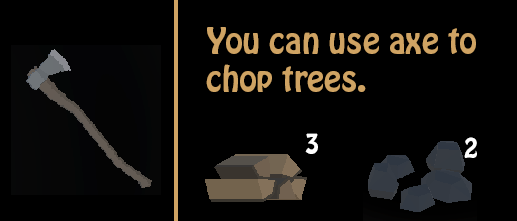
<style>
.page{position:relative;width:517px;height:221px;background:#000000}
.page>*{position:absolute;margin:0}
.t1{font:32px "HoboStd";color:#cfa363}
.t2{font:25px "HoboStd";color:#ffffff}
</style>
<div class="page">
<p class="t1" style="left:206px;top:27px;width:270px;height:65px;text-align:right">You can use axe to<br>.chop trees</p>
<p class="t2" style="left:305px;top:133px;width:13px;height:21px">3</p>
<p class="t2" style="left:464px;top:137px;width:13px;height:21px">2</p>
</div>
